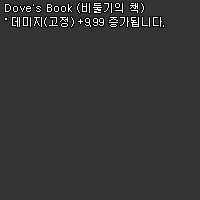
<style>
.page{position:relative;width:200px;height:200px;background:#333333}
.page>*{position:absolute;margin:0}
.t1{font:11px/14px "Dotum";color:#ffffff}
</style>
<div class="page">
<p class="t1" style="left:5px;top:3px;width:159px;height:24px">Dove's Book (비둘기의 책)<br>˚ 데미지(고정) +9.99 증가됩니다.</p>
</div>
